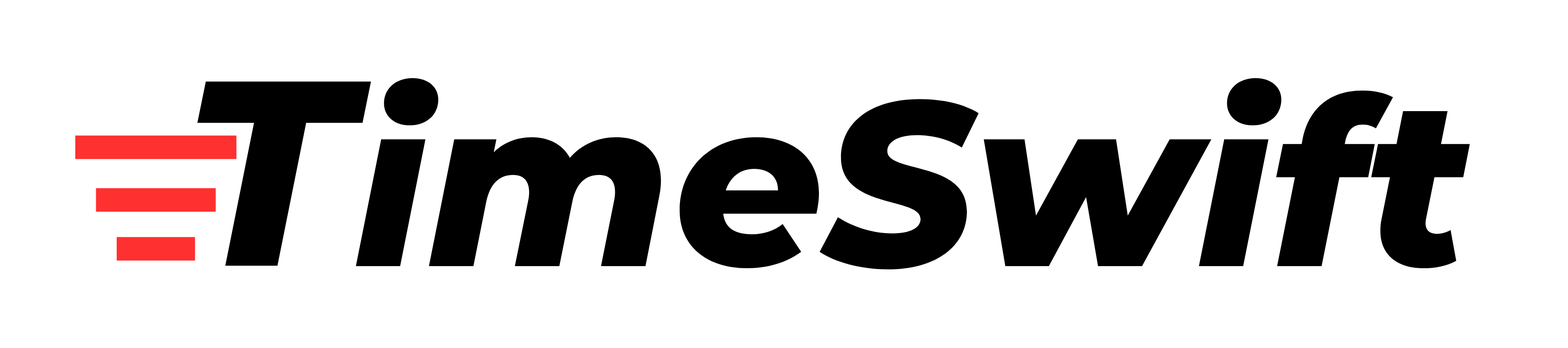
<style>
.page{position:relative;width:1568px;height:348px;background:#ffffff}
.page>*{position:absolute;margin:0}
.t1{font:234.1px "Montserrat-ExtraBoldItalic";color:#000000}
.t2{font:263.4px "Montserrat-ExtraBoldItalic";color:#000000}
</style>
<div class="page">
<p class="t1" style="left:356px;top:78px;width:1114px;height:192px">imeSwift</p>
<p class="t2" style="left:197px;top:82px;width:174px;height:184px">T</p>
</div>
